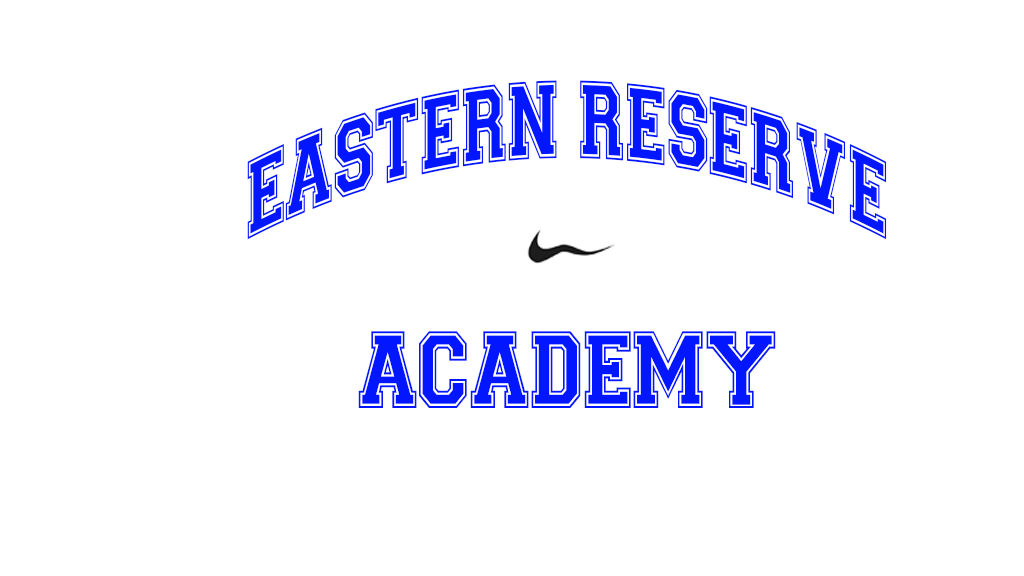
<style>
.page{position:relative;width:1024px;height:576px;background:#ffffff}
.page>*{position:absolute;margin:0}
.t1{font:110.7px "Varsity-Regular";color:#0217ff;scale:0.65 1}
.t2{font:109.6px "Varsity-Regular";color:#0217ff;scale:0.81 1}
</style>
<div class="page">
<p class="t1" style="left:247px;top:80px;width:640px;height:160px">EASTERN RESERVE</p>
<p class="t2" style="left:358px;top:331px;width:418px;height:77px">ACADEMY</p>
</div>
